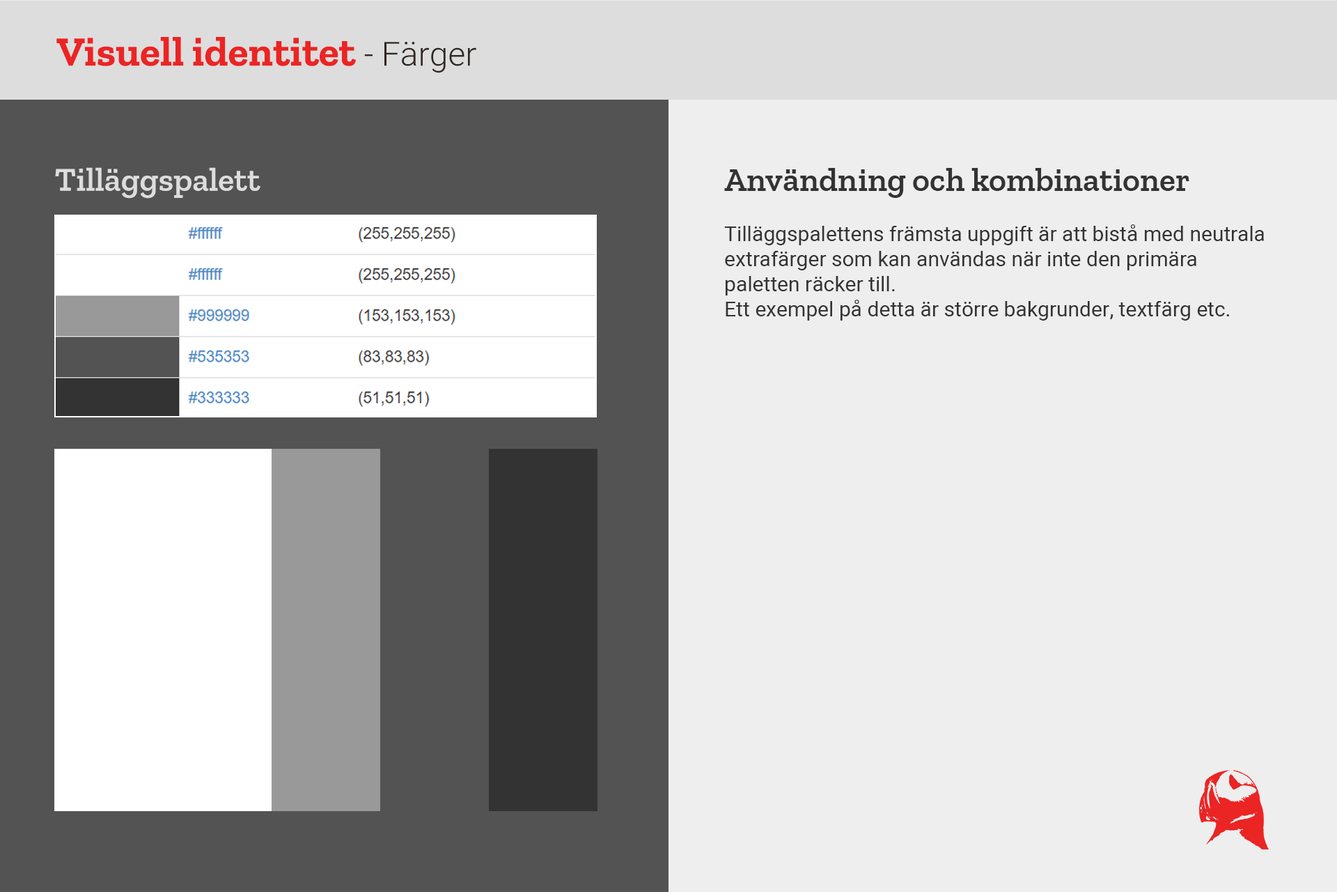
<style>
.page{position:relative;width:1337px;height:892px;background:#eeeeee}
.page>*{position:absolute;margin:0}
.t1{font:41.8px "ZillaSlab-Bold";color:#eb2424}
.t2{font:33.4px "Heebo-Light";color:#302723}
.t3{font:33.4px "ZillaSlab-SemiBold";color:#dddddd}
.t4{font:20.9px "Heebo-Regular";color:#333333}
.t5{font:33.4px "ZillaSlab-SemiBold";color:#333333}
</style>
<div class="page">
<p class="t1" style="left:56px;top:37px;width:420px;height:36px">Visuell identitet<span class="t2"> - Färger</span></p>
<p class="t3" style="left:55px;top:167px;width:206px;height:32px">Tilläggspalett</p>
<p class="t4" style="left:724px;top:168px;width:541px;height:152px"><span class="t5">Användning och kombinationer<br></span><br>Tilläggspalettens främsta uppgift är att bistå med neutrala extrafärger som kan användas när inte den primära paletten räcker till.<br>Ett exempel på detta är större bakgrunder, textfärg etc.</p>
</div>
